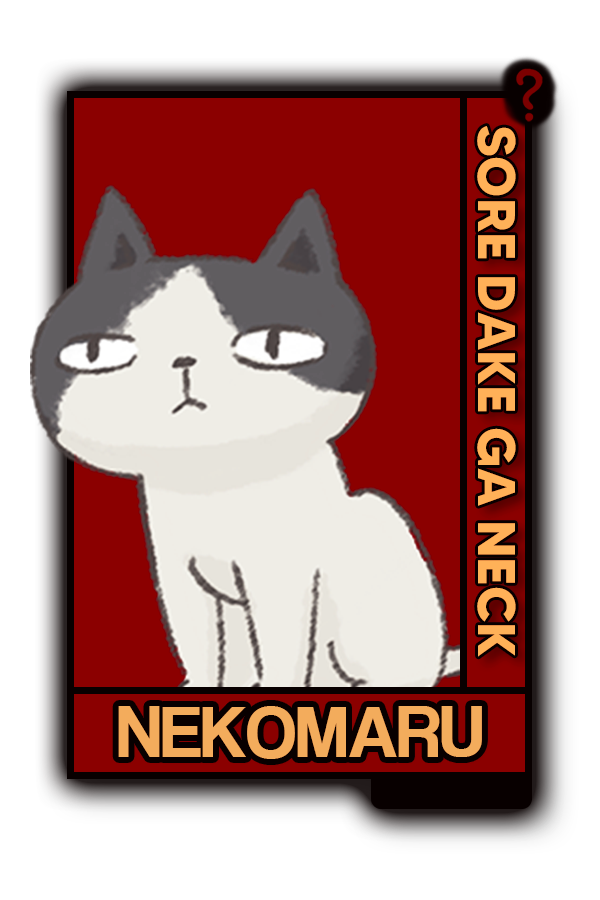
<style>
.page{position:relative;width:600px;height:900px;background:#8b0000}
.page>*{position:absolute;margin:0}
.t1{font:52.7px "MADETOMMY-Bold";color:#ffb158}
.t2{font:75px "CoolveticaRg-Regular";color:#f3ac5c}
</style>
<div class="page">
<p class="t1" style="left:477px;top:126px;width:39px;height:531px;rotate:90deg">SORE DAKE GA NECK</p>
<p class="t2" style="left:118px;top:706px;width:364px;height:53px">NEKOMARU</p>
</div>
